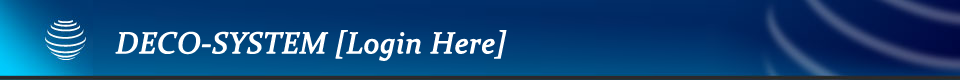
<style>
.page{position:relative;width:960px;height:80px}
.page>*{position:absolute;margin:0}
.t1{font:30px "Constantia-Italic";color:#ffffff;font-weight:bold}
</style>
<div class="page">
<p class="t1" style="left:115px;top:30px;width:392px;height:31px">DECO-SYSTEM [Login Here]</p>
</div>
